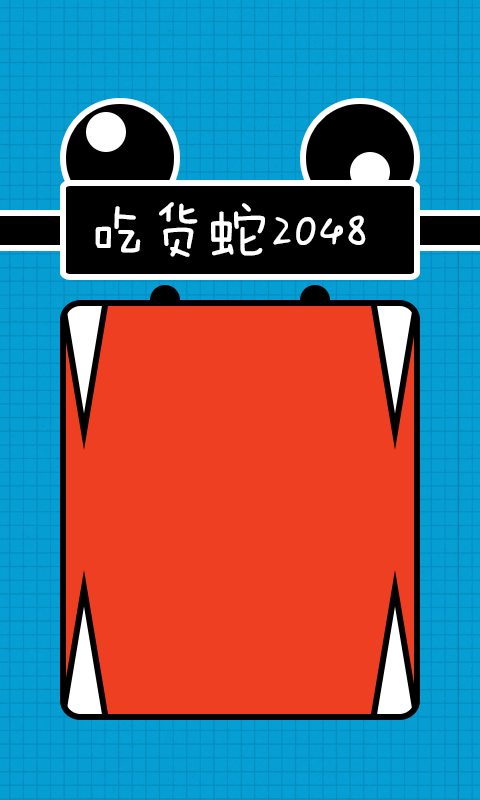
<style>
.page{position:relative;width:480px;height:800px;background:#ef3f22}
.page>*{position:absolute;margin:0}
.t1{font:60px "FZMWJW--GB1-0";color:#ffffff}
</style>
<div class="page">
<p class="t1" style="left:95px;top:202px;width:271px;height:55px">吃货蛇2048</p>
</div>
